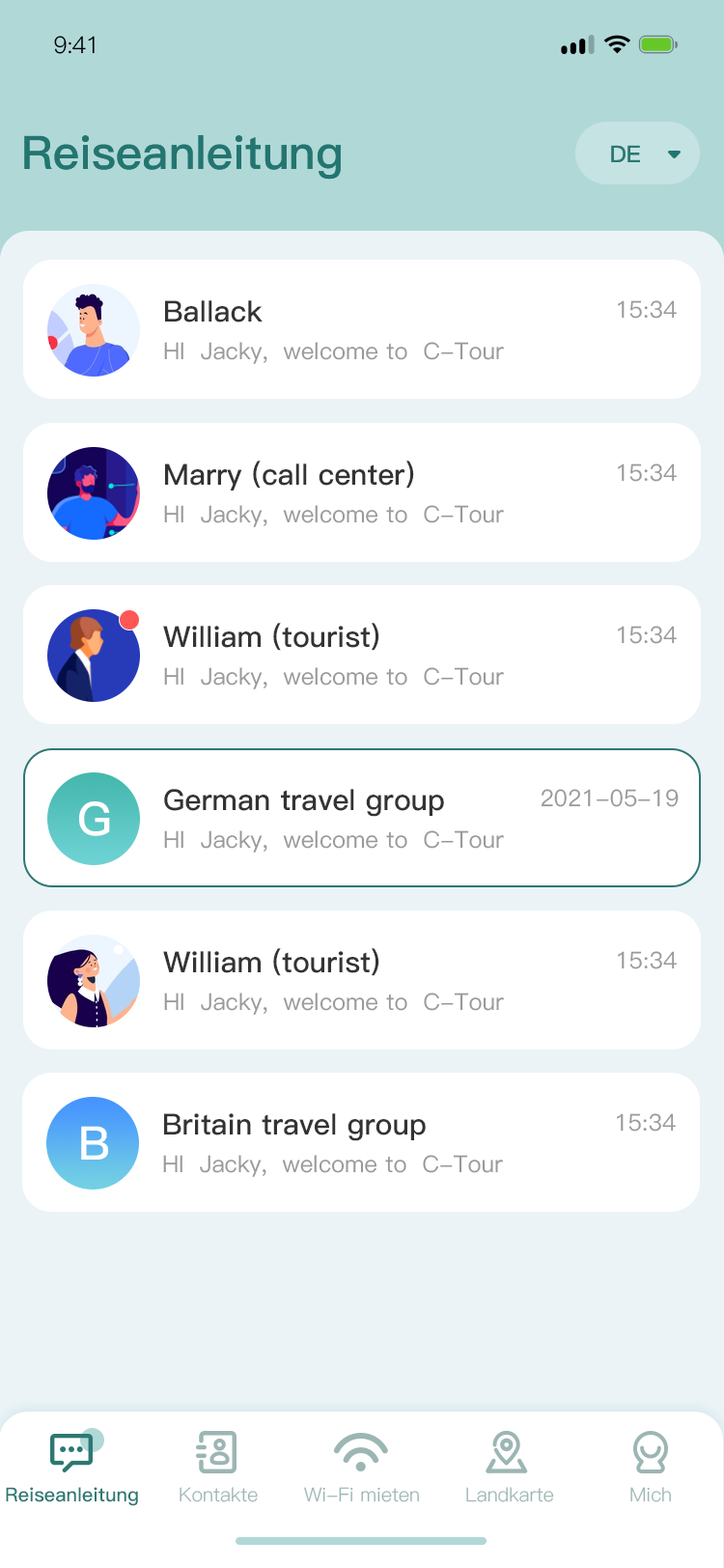
<style>
.page{position:relative;width:724px;height:1568px;background:#ffffff}
.page>*{position:absolute;margin:0}
.t1{font:23.2px "PingFang-SC-Regular";letter-spacing:-0.025em;color:#000000}
.t2{font:46.3px "PingFang-SC-Bold";color:#237570}
.t3{font:23.2px "PingFang-SC-Bold";color:#2c7873}
.t4{font:29px "PingFang-SC-Bold";color:#333333}
.t5{font:23.2px "PingFang-SC-Medium";color:#999999}
.t6{font:46.3px "PingFang-SC-Bold";color:#ffffff}
.t7{font:19.3px "PingFang-SC-Bold";color:#2c7873}
.t8{font:19.3px "PingFang-SC-Regular";color:#9cb6b4}
.t9{font:19.3px "PingFang-SC-Regular";color:#9eb7b5}
</style>
<div class="page">
<p class="t1" style="left:54px;top:36px;width:41px;height:18px">9:41</p>
<p class="t2" style="left:24px;top:135px;width:317px;height:45px">Reiseanleitung</p>
<p class="t3" style="left:611px;top:145px;width:29px;height:17px">DE</p>
<p class="t4" style="left:165px;top:300px;width:98px;height:22px">Ballack</p>
<p class="t5" style="left:618px;top:300px;width:59px;height:19px">15:34</p>
<p class="t5" style="left:164px;top:342px;width:340px;height:22px">HI  Jacky,  welcome to  C-Tour</p>
<p class="t4" style="left:165px;top:461px;width:249px;height:29px">Marry (call center)</p>
<p class="t5" style="left:618px;top:463px;width:59px;height:19px">15:34</p>
<p class="t5" style="left:164px;top:505px;width:340px;height:22px">HI  Jacky,  welcome to  C-Tour</p>
<p class="t4" style="left:163px;top:623px;width:216px;height:28px">William (tourist)</p>
<p class="t5" style="left:618px;top:626px;width:59px;height:18px">15:34</p>
<p class="t5" style="left:164px;top:667px;width:340px;height:22px">HI  Jacky,  welcome to  C-Tour</p>
<p class="t4" style="left:164px;top:789px;width:280px;height:28px">German travel group</p>
<p class="t5" style="left:541px;top:789px;width:138px;height:18px">2021-05-19</p>
<p class="t6" style="left:79px;top:801px;width:31px;height:35px">G</p>
<p class="t5" style="left:164px;top:830px;width:340px;height:23px">HI  Jacky,  welcome to  C-Tour</p>
<p class="t4" style="left:163px;top:948px;width:216px;height:28px">William (tourist)</p>
<p class="t5" style="left:618px;top:951px;width:59px;height:18px">15:34</p>
<p class="t5" style="left:164px;top:993px;width:340px;height:22px">HI  Jacky,  welcome to  C-Tour</p>
<p class="t4" style="left:164px;top:1113px;width:262px;height:28px">Britain travel group</p>
<p class="t5" style="left:617px;top:1113px;width:59px;height:19px">15:34</p>
<p class="t6" style="left:81px;top:1126px;width:27px;height:34px">B</p>
<p class="t5" style="left:163px;top:1155px;width:340px;height:22px">HI  Jacky,  welcome to  C-Tour</p>
<p class="t7" style="left:6px;top:1487px;width:132px;height:19px">Reiseanleitung</p>
<p class="t8" style="left:180px;top:1487px;width:78px;height:15px">Kontakte</p>
<p class="t8" style="left:304px;top:1487px;width:115px;height:15px">Wi-Fi mieten</p>
<p class="t8" style="left:466px;top:1487px;width:88px;height:15px">Landkarte</p>
<p class="t9" style="left:630px;top:1487px;width:41px;height:15px">Mich</p>
</div>
